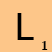
<style>
.page{position:relative;width:52px;height:52px;background:#fdc689}
.page>*{position:absolute;margin:0}
.t1{font:38px "LucidaSansUnicode";color:#000000}
.t2{font:13px "LiberationSerif-Bold";color:#000000}
</style>
<div class="page">
<p class="t1" style="left:17px;top:13px;width:17px;height:27px">L</p>
<p class="t2" style="left:42px;top:41px;width:6px;height:9px">1</p>
</div>
